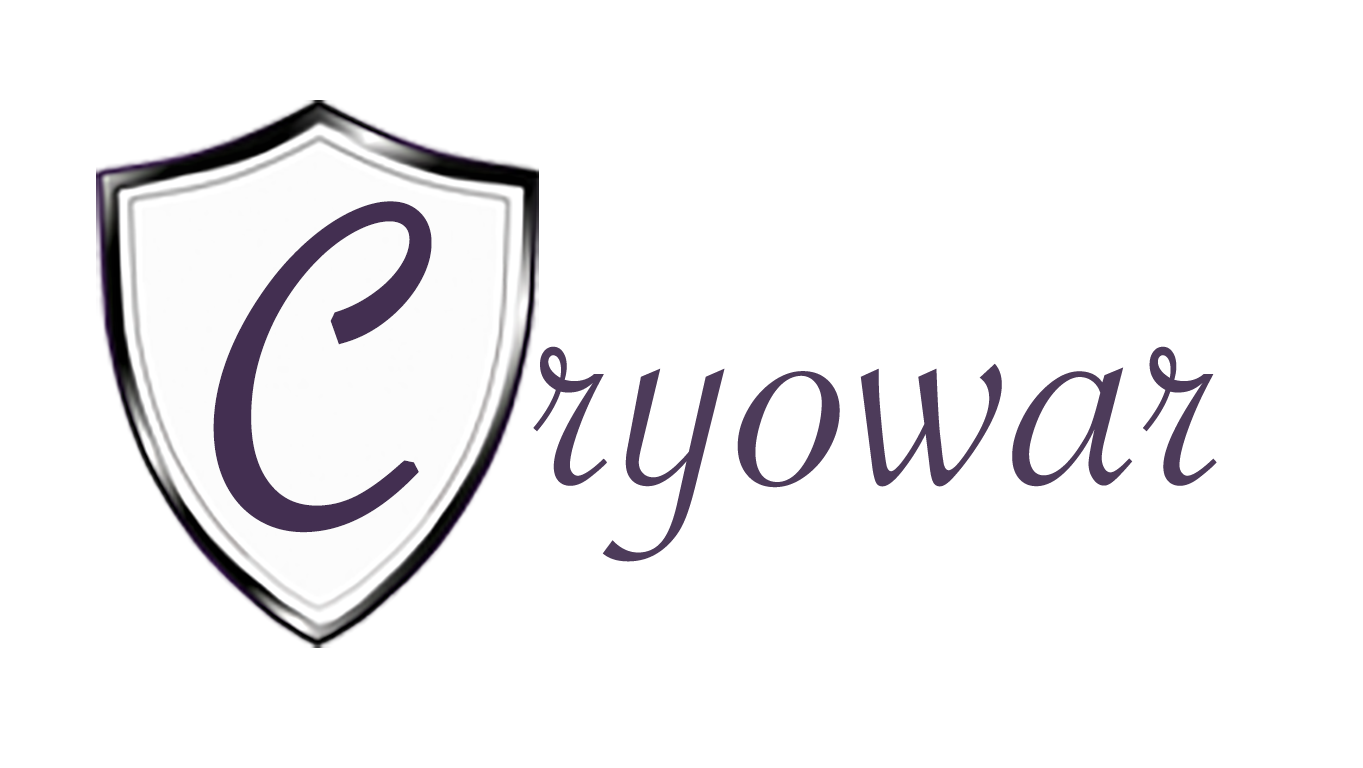
<style>
.page{position:relative;width:1363px;height:768px;background:#ffffff}
.page>*{position:absolute;margin:0}
.t1{font:476.7px "SavoyeLetPlain";color:#432f51;font-weight:bold;scale:0.96 1}
.t2{font:402.1px "SavoyeLetPlain";color:#4d3b5a}
</style>
<div class="page">
<p class="t1" style="left:213px;top:201px;width:219px;height:332px">C</p>
<p class="t2" style="left:533px;top:346px;width:684px;height:216px">ryowar</p>
</div>
